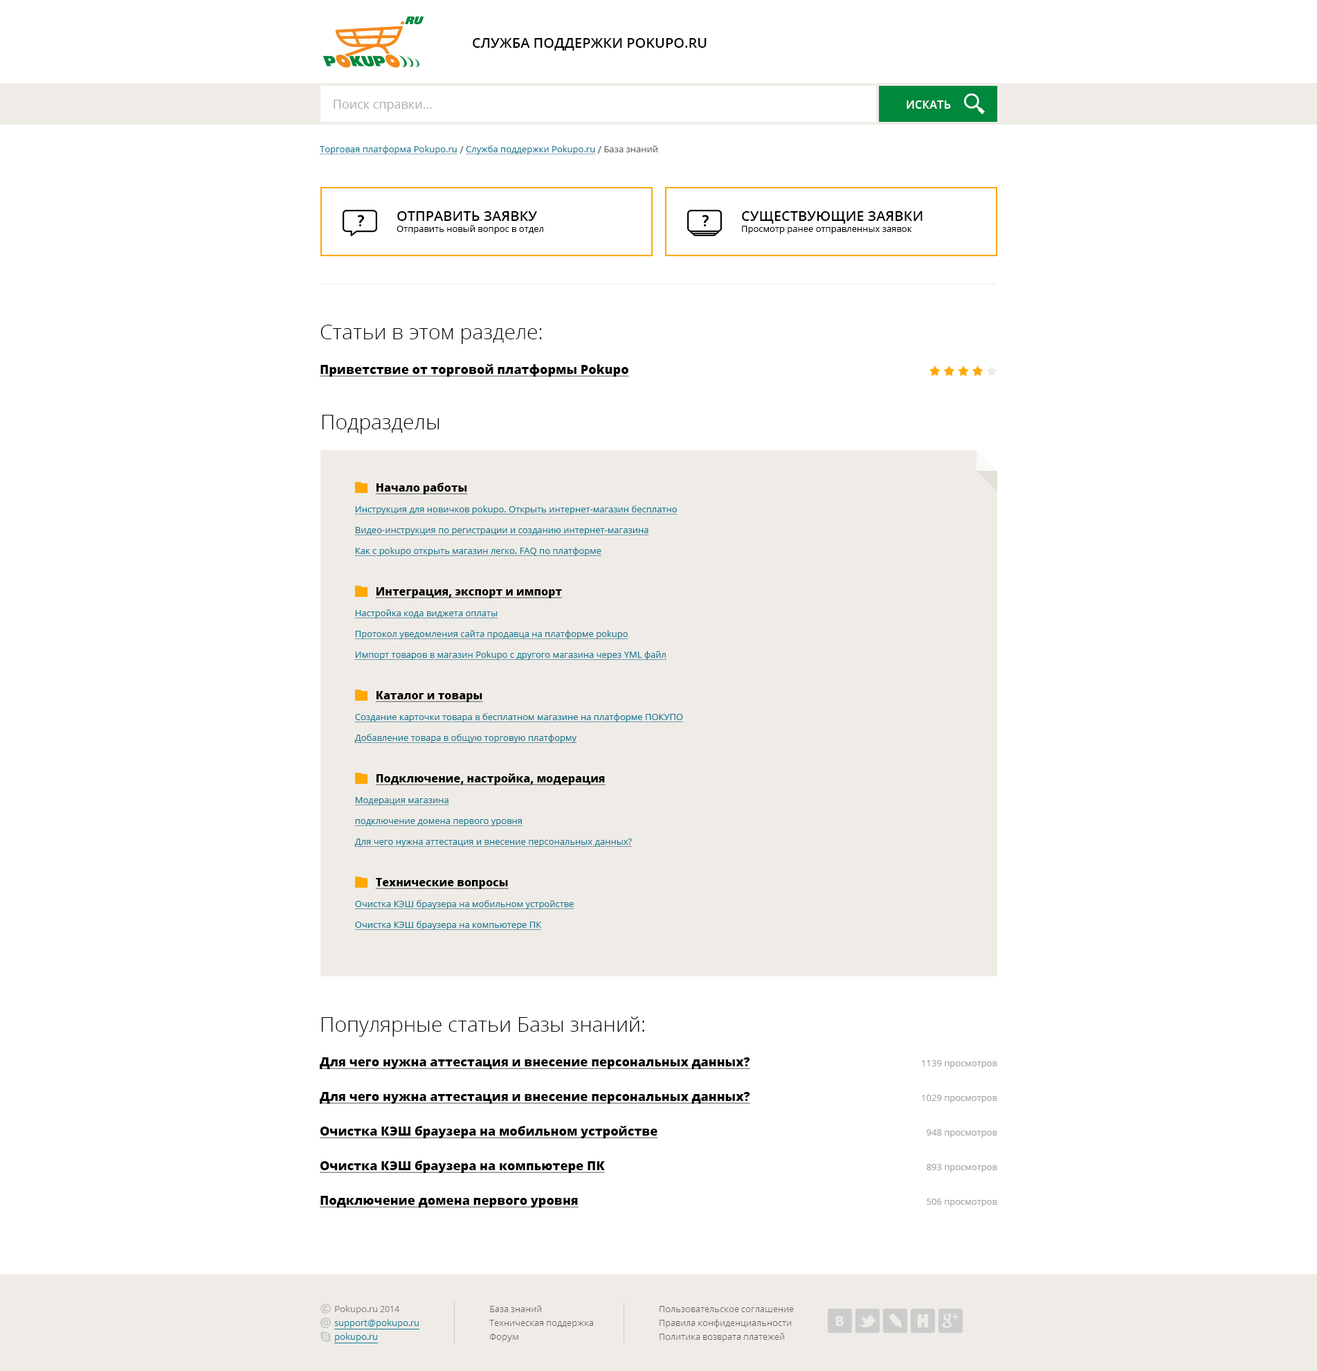
<style>
.page{position:relative;width:1317px;height:1371px;background:#ffffff}
.page>*{position:absolute;margin:0}
.t1{font:13.8px "OpenSans-Semibold";color:#000000;text-transform:uppercase}
.t2{font:12.5px "OpenSans";color:#adadad}
.t3{font:11.1px "OpenSans-Semibold";letter-spacing:0.025em;color:#ffffff;text-transform:uppercase}
.t4{font:9px "OpenSans";color:#177a93;text-decoration:underline}
.t5{font:10.4px "OpenSans";color:#666666}
.t6{font:9px "OpenSans";color:#666666}
.t7{font:9px/11.1px "OpenSans";color:#000000}
.t8{font:13.8px/11.1px "OpenSans-Semibold";color:#000000;text-transform:uppercase}
.t9{font:20.8px "OpenSans-Light";color:#000000}
.t10{font:12.5px "OpenSans-Extrabold";color:#000000;text-decoration:underline}
.t11{font:9px/13.8px "OpenSans";color:#177a93;text-decoration:underline}
.t12{font:11.1px/13.8px "OpenSans-Extrabold";color:#000000;text-decoration:underline}
.t13{font:12.5px/34.6px "OpenSans-Extrabold";color:#000000;text-decoration:underline}
.t14{font:9px/34.6px "OpenSans";color:#a3a3a3}
</style>
<div class="page">
<p class="t1" style="left:473px;top:38px;width:234px;height:13px">Служба поддержки Pokupo.ru</p>
<p class="t2" style="left:334px;top:100px;width:98px;height:11px">Поиск справки...</p>
<p class="t3" style="left:907px;top:100px;width:44px;height:9px">искать</p>
<p class="t4" style="left:320px;top:145px;width:338px;height:9px">Торговая платформа Pokupo.ru <span class="t5">/ </span>Служба поддержки Pokupo.ru <span class="t5">/</span><span class="t6"> База знаний</span></p>
<p class="t7" style="left:397px;top:211px;width:146px;height:23px"><span class="t8">Отправить заявку<br></span>Отправить новый вопрос в отдел</p>
<p class="t7" style="left:742px;top:211px;width:181px;height:23px"><span class="t8">существующие заявки<br></span>Просмотр ранее отправленных заявок</p>
<p class="t9" style="left:321px;top:325px;width:221px;height:19px">Статьи в этом разделе:</p>
<p class="t10" style="left:320px;top:364px;width:309px;height:13px">Приветствие от торговой платформы Pokupo</p>
<p class="t9" style="left:322px;top:415px;width:118px;height:19px">Подразделы</p>
<p class="t11" style="left:354px;top:483px;width:324px;height:73px"><span class="t12">Начало работы<br></span>Инструкция для новичков pokupo. Открыть интернет-магазин бесплатно<br>Видео-инструкция по регистрации и созданию интернет-магазина<br>Как с pokupo открыть магазин легко. FAQ по платформе</p>
<p class="t11" style="left:354px;top:587px;width:313px;height:73px"><span class="t12">Интеграция, экспорт и импорт<br></span>Настройка кода виджета оплаты<br>Протокол уведомления сайта продавца на платформе pokupo<br>Импорт товаров в магазин Pokupo с другого магазина через YML файл</p>
<p class="t11" style="left:354px;top:691px;width:330px;height:52px"><span class="t12">Каталог и товары<br></span>Создание карточки товара в бесплатном магазине на платформе ПОКУПО<br>Добавление товара в общую торговую платформу</p>
<p class="t11" style="left:354px;top:773px;width:279px;height:74px"><span class="t12">Подключение, настройка, модерация<br></span>Модерация магазина<br>подключение домена первого уровня<br>Для чего нужна аттестация и внесение персональных данных?</p>
<p class="t11" style="left:354px;top:878px;width:221px;height:52px"><span class="t12">Технические вопросы<br></span>Очистка КЭШ браузера на мобильном устройстве<br>Очистка КЭШ браузера на компьютере ПК</p>
<p class="t9" style="left:321px;top:1016px;width:324px;height:20px">Популярные статьи Базы знаний:</p>
<p class="t13" style="left:320px;top:1057px;width:430px;height:150px">Для чего нужна аттестация и внесение персональных данных?<br>Для чего нужна аттестация и внесение персональных данных?<br>Очистка КЭШ браузера на мобильном устройстве<br>Очистка КЭШ браузера на компьютере ПК<br>Подключение домена первого уровня</p>
<p class="t14" style="left:922px;top:1060px;width:76px;height:147px;text-align:right">1139 просмотров<br>1029 просмотров<br>948 просмотров<br>893 просмотров<br>506 просмотров</p>
</div>
